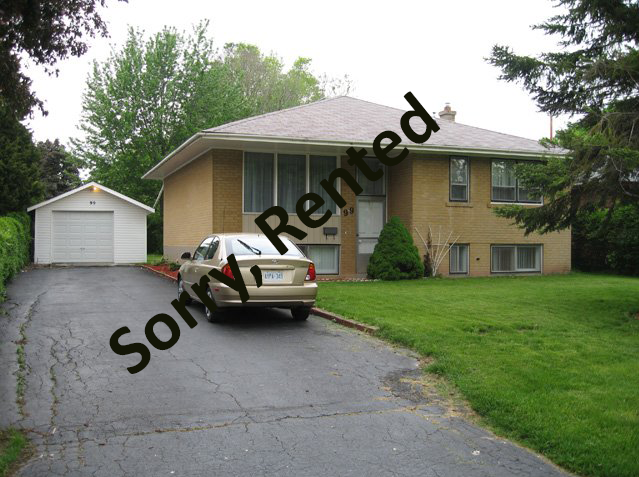
<style>
.page{position:relative;width:639px;height:477px}
.page>*{position:absolute;margin:0}
.t1{font:72px "Calibri-Bold";color:#131506}
</style>
<div class="page">
<p class="t1" style="left:109px;top:91px;width:331px;height:283px;rotate:-39deg">Sorry, Rented</p>
</div>
